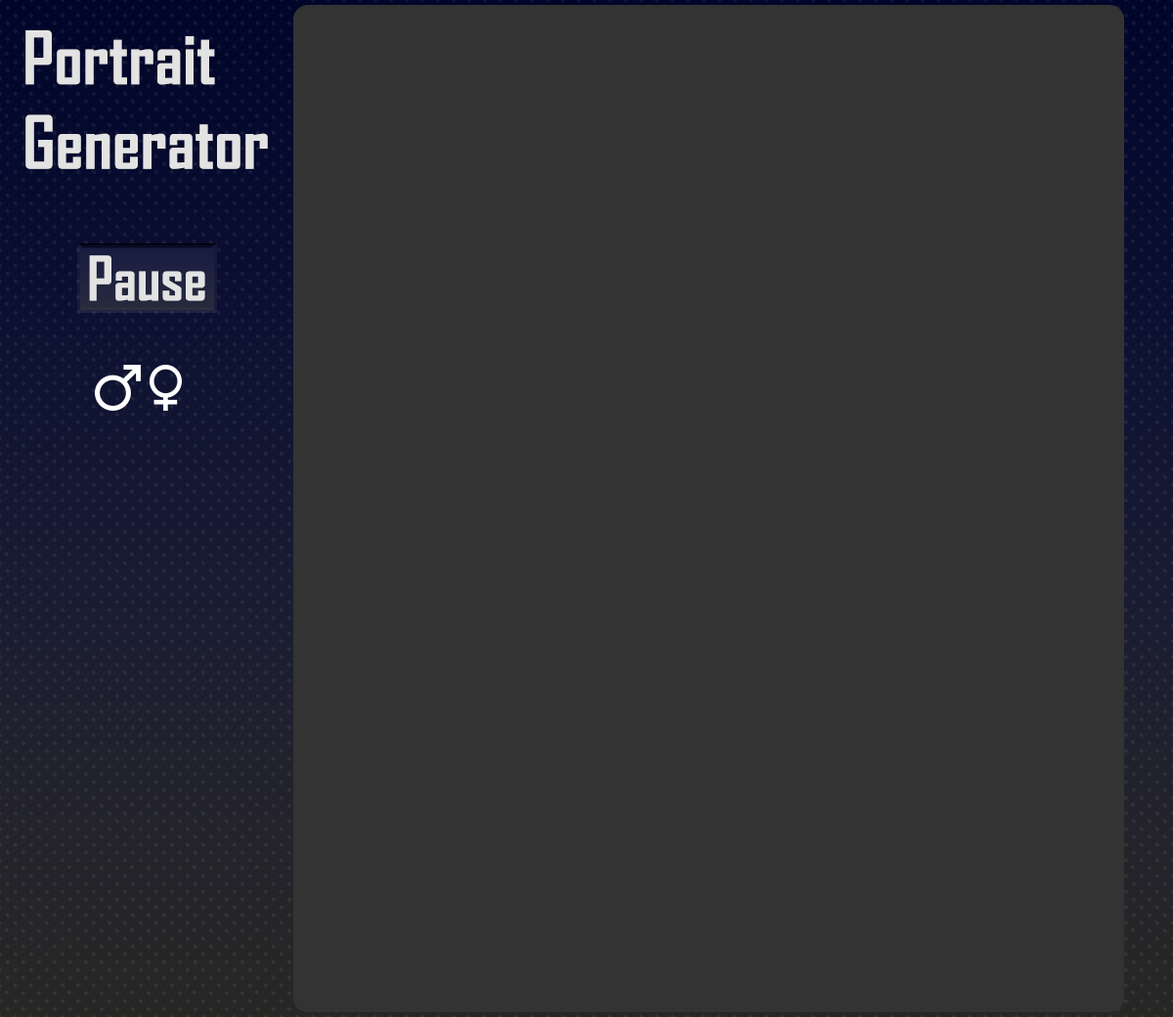
<style>
.page{position:relative;width:1173px;height:1017px;background:#333333}
.page>*{position:absolute;margin:0}
.t1{font:70.4px "AgencyFB-Bold";color:#e3e3e3}
.t2{font:58.6px "AgencyFB-Bold";color:#e3e3e3}
</style>
<div class="page">
<p class="t1" style="left:25px;top:30px;width:243px;height:139px">Portrait<br>Generator</p>
<p class="t2" style="left:89px;top:255px;width:116px;height:46px">Pause</p>
</div>
